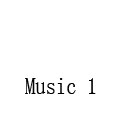
<style>
.page{position:relative;width:120px;height:120px;background:#ffffff}
.page>*{position:absolute;margin:0}
.t1{font:24.2px "SimSun";color:#000000;scale:0.85 1}
</style>
<div class="page">
<p class="t1" style="left:25px;top:78px;width:71px;height:16px">Music 1</p>
</div>
